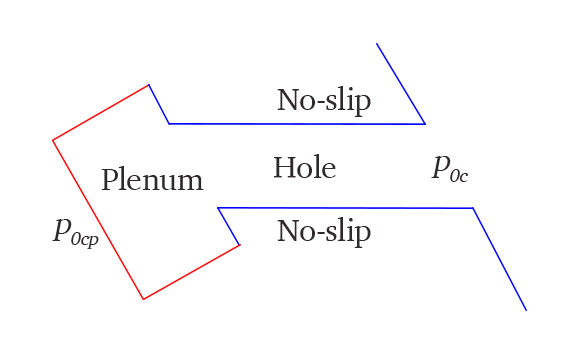
<style>
.page{position:relative;width:577px;height:358px;background:#ffffff}
.page>*{position:absolute;margin:0}
.t1{font:32px "Charter-Roman";letter-spacing:-0.02em;color:#2f292b}
.t2{font:32px "Charter-Roman";letter-spacing:-0.02em;color:#2f292b;font-style:italic}
</style>
<div class="page">
<p class="t1" style="left:277px;top:86px;width:94px;height:31px">No-slip</p>
<p class="t1" style="left:274px;top:154px;width:62px;height:24px">Hole</p>
<p class="t2" style="left:431px;top:156px;width:37px;height:26px">p0c</p>
<p class="t1" style="left:101px;top:166px;width:103px;height:24px">Plenum</p>
<p class="t2" style="left:52px;top:219px;width:47px;height:30px">p0cp</p>
<p class="t1" style="left:277px;top:217px;width:94px;height:31px">No-slip</p>
</div>
